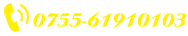
<style>
.page{position:relative;width:188px;height:36px;background:#ffffff}
.page>*{position:absolute;margin:0}
.t1{font:22.7px "Ariston";color:#fff000}
</style>
<div class="page">
<p class="t1" style="left:33px;top:12px;width:153px;height:16px">0755-61910103</p>
</div>
